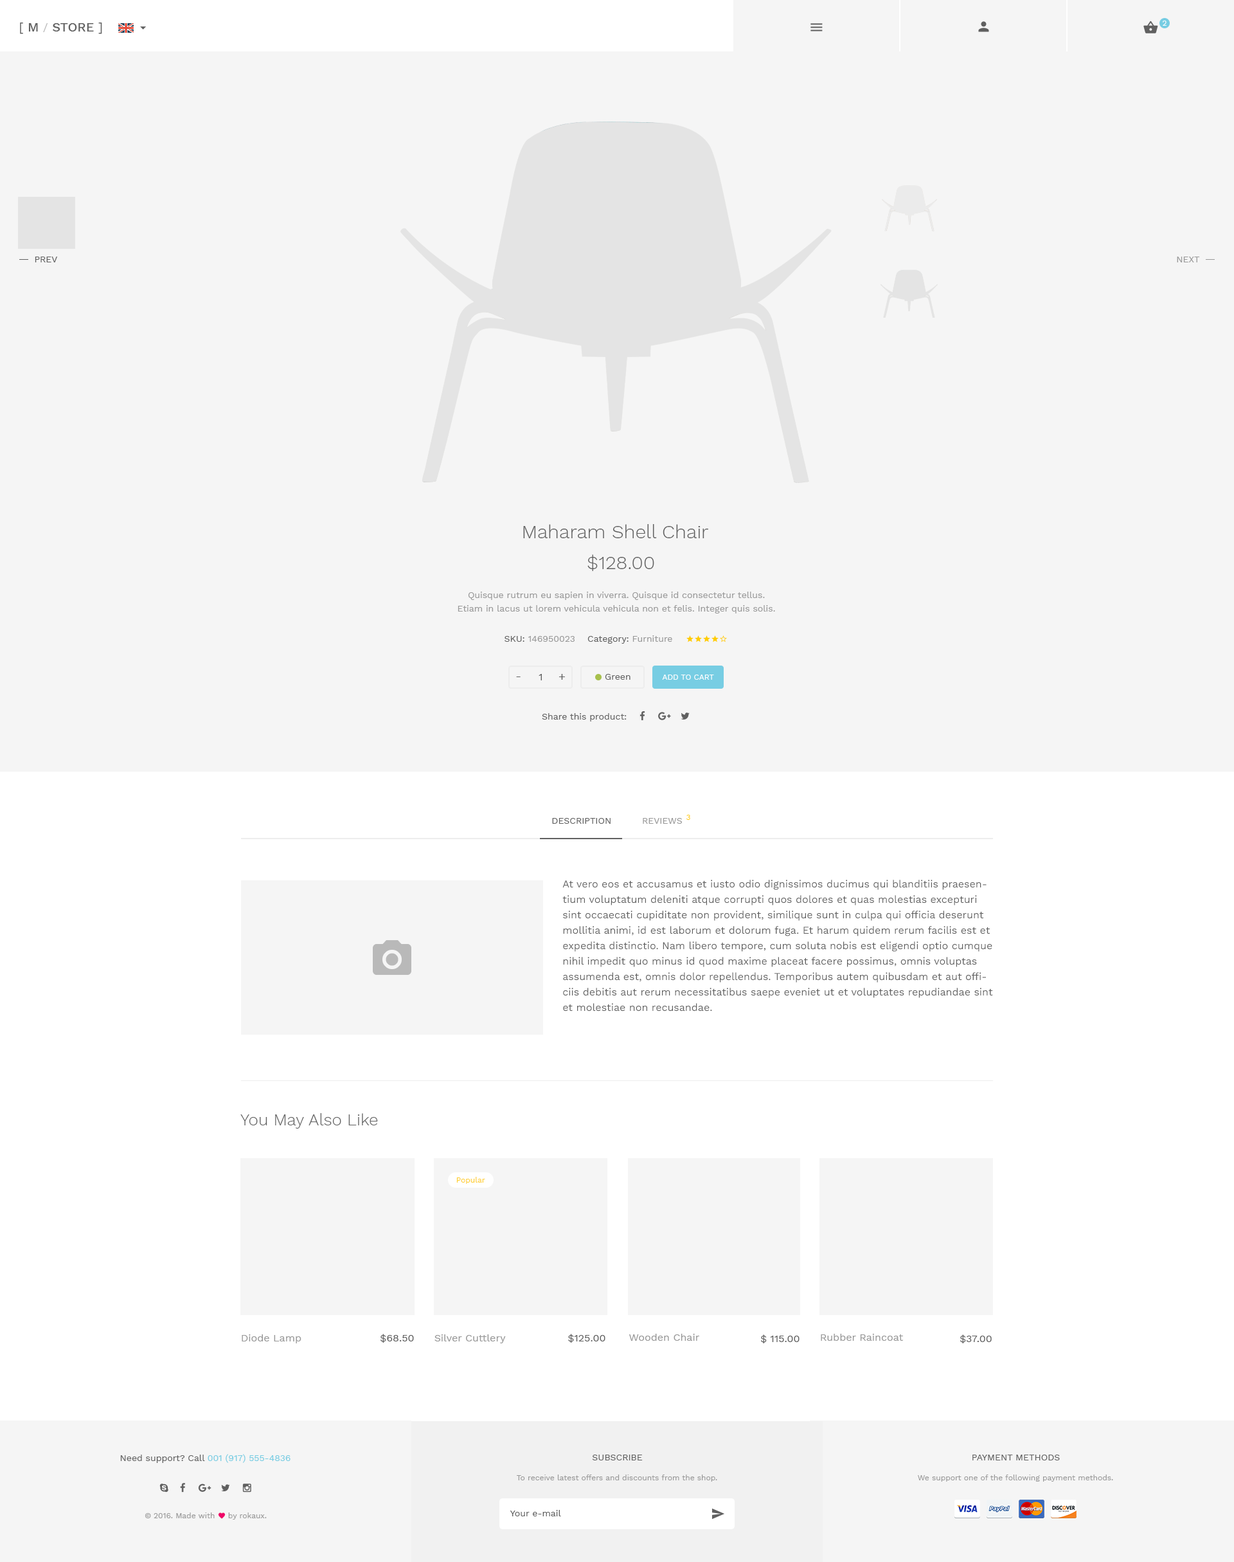
<style>
.page{position:relative;width:1234px;height:1562px;background:#f5f5f5}
.page>*{position:absolute;margin:0}
.t1{font:12.9px "WorkSans-Medium";color:#606060}
.t2{font:12.9px "WorkSans-Regular";color:#606060}
.t3{font:11.6px "WorkSans-Regular";color:#bababa}
.t4{font:7.7px "WorkSans-Regular";color:#fffefe}
.t5{font:9px "WorkSans-Regular";color:#606060;text-transform:uppercase}
.t6{font:9px "WorkSans-Regular";color:#999999;text-transform:uppercase}
.t7{font:19.3px/30.9px "WorkSans-Light";color:#606060}
.t8{font:9px/13.5px "WorkSans-Regular";color:#999999}
.t9{font:9px "WorkSans-Regular";color:#999999}
.t10{font:9px "WorkSans-Regular";color:#606060}
.t11{font:11.6px "WorkSans-Regular";color:#606060}
.t12{font:10.3px "WorkSans-Regular";color:#606060}
.t13{font:7.7px "WorkSans-Regular";color:#ffffff;text-transform:uppercase}
.t14{font:7.7px "WorkSans-Regular";color:#ffcc00;text-transform:uppercase}
.t15{font:10.3px/15.4px "WorkSans-Regular";color:#606060}
.t16{font:16.7px "WorkSans-Light";color:#606060}
.t17{font:7.7px "WorkSans-Regular";color:#ffce2b}
.t18{font:10.3px "WorkSans-Regular";color:#999999}
.t19{font:9px "WorkSans-Regular";color:#77cde3}
.t20{font:7.7px "WorkSans-Regular";color:#999999}
</style>
<div class="page">
<p class="t1" style="left:20px;top:22px;width:82px;height:12px"><span class="t2">[</span> M <span class="t3">/ </span>STORE <span class="t2">]</span></p>
<p class="t4" style="left:1163px;top:21px;width:4px;height:5px">2</p>
<p class="t5" style="left:35px;top:256px;width:23px;height:6px">Prev</p>
<p class="t6" style="left:1177px;top:256px;width:23px;height:6px">Next</p>
<p class="t7" style="left:523px;top:524px;width:185px;height:47px;text-align:center">Maharam Shell Chair  <br>$128.00</p>
<p class="t8" style="left:458px;top:591px;width:317px;height:22px;text-align:center">Quisque rutrum eu sapien in viverra. Quisque id consectetur tellus. Etiam in lacus ut lorem vehicula vehicula non et felis. Integer quis solis.</p>
<p class="t9" style="left:505px;top:635px;width:167px;height:9px"><span class="t10">SKU: </span>146950023<span class="t10">    Category: </span>Furniture</p>
<p class="t11" style="left:516px;top:676px;width:5px;height:1px">-</p>
<p class="t12" style="left:539px;top:674px;width:3px;height:6px">1</p>
<p class="t11" style="left:559px;top:674px;width:6px;height:6px">+</p>
<p class="t10" style="left:605px;top:674px;width:26px;height:6px">Green</p>
<p class="t13" style="left:662px;top:674px;width:52px;height:6px">Add To Cart</p>
<p class="t10" style="left:542px;top:713px;width:85px;height:8px">Share this product:</p>
<p class="t5" style="left:552px;top:818px;width:130px;height:6px">Description          <span class="t6">Reviews</span></p>
<p class="t14" style="left:687px;top:815px;width:3px;height:5px">3</p>
<p class="t15" style="left:562px;top:879px;width:431px;height:132px">At vero eos et accusamus et iusto odio dignissimos ducimus qui blanditiis praesentium voluptatum deleniti atque corrupti quos dolores et quas molestias excepturi sint occaecati cupiditate non provident, similique sunt in culpa qui officia deserunt mollitia animi, id est laborum et dolorum fuga. Et harum quidem rerum facilis est et expedita distinctio. Nam libero tempore, cum soluta nobis est eligendi optio cumque nihil impedit quo minus id quod maxime placeat facere possimus, omnis voluptas assumenda est, omnis dolor repellendus. Temporibus autem quibusdam et aut officiis debitis aut rerum necessitatibus saepe eveniet ut et voluptates repudiandae sint et molestiae non recusandae.</p>
<p class="t16" style="left:240px;top:1113px;width:138px;height:15px">You May Also Like</p>
<p class="t17" style="left:456px;top:1176px;width:29px;height:8px">Popular</p>
<p class="t18" style="left:242px;top:1334px;width:60px;height:9px">Diode Lamp</p>
<p class="t12" style="left:380px;top:1333px;width:34px;height:9px">$68.50</p>
<p class="t18" style="left:435px;top:1334px;width:71px;height:9px">Silver Cuttlery</p>
<p class="t12" style="left:568px;top:1333px;width:38px;height:9px">$125.00</p>
<p class="t18" style="left:629px;top:1333px;width:70px;height:7px">Wooden Chair</p>
<p class="t12" style="left:760px;top:1334px;width:40px;height:9px">$ 115.00</p>
<p class="t18" style="left:821px;top:1333px;width:82px;height:7px">Rubber Raincoat</p>
<p class="t12" style="left:960px;top:1334px;width:32px;height:9px">$37.00</p>
<p class="t10" style="left:120px;top:1454px;width:171px;height:8px">Need support? Call <span class="t19">001 (917) 555-4836</span></p>
<p class="t5" style="left:592px;top:1454px;width:51px;height:6px">Subscribe</p>
<p class="t5" style="left:973px;top:1454px;width:87px;height:6px">Payment Methods</p>
<p class="t20" style="left:517px;top:1474px;width:200px;height:7px">To receive latest offers and discounts from the shop.</p>
<p class="t20" style="left:918px;top:1474px;width:195px;height:7px">We support one of the following payment methods.</p>
<p class="t20" style="left:145px;top:1512px;width:122px;height:7px">© 2016. Made with     by rokaux.</p>
<p class="t10" style="left:510px;top:1509px;width:51px;height:7px">Your e-mail</p>
</div>
